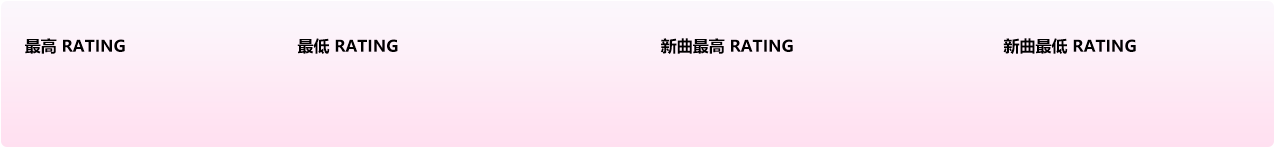
<style>
.page{position:relative;width:1275px;height:150px}
.page>*{position:absolute;margin:0}
.t1{font:16px "MicrosoftYaHei-Bold";color:#000000}
</style>
<div class="page">
<p class="t1" style="left:25px;top:38px;width:1111px;height:16px">最高 RATING                                    最低 RATING                                                       新曲最高 RATING                                            新曲最低 RATING</p>
</div>
